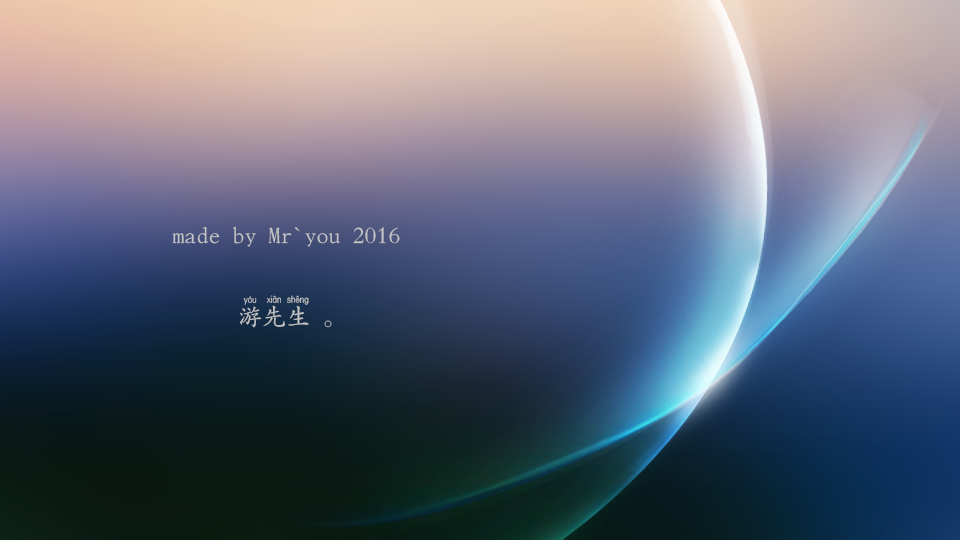
<style>
.page{position:relative;width:960px;height:540px}
.page>*{position:absolute;margin:0}
.t1{font:24px "FZKTPY01--GB1-0";color:#c5c5c5}
</style>
<div class="page">
<p class="t1" style="left:172px;top:226px;width:228px;height:21px">made by Mr`you 2016</p>
<p class="t1" style="left:240px;top:295px;width:92px;height:33px">游先生 。</p>
</div>
